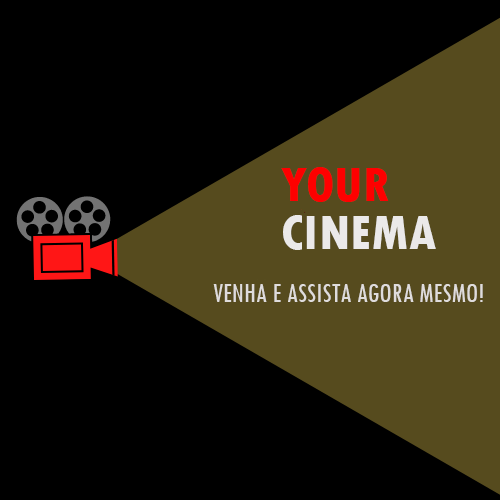
<style>
.page{position:relative;width:500px;height:500px;background:#000000}
.page>*{position:absolute;margin:0}
.t1{font:51px/48px "TwCenMT-CondensedExtraBold";color:#ebe9e9}
.t2{font:51px/48px "TwCenMT-CondensedExtraBold";color:#fe0000}
.t3{font:28px "TwCenMT-Condensed";color:#dfdcdc}
</style>
<div class="page">
<p class="t1" style="left:281px;top:167px;width:155px;height:83px"><span class="t2">YOUR<br></span>CINEMA</p>
<p class="t3" style="left:213px;top:284px;width:270px;height:18px">VENHA E ASSISTA AGORA MESMO!</p>
</div>
